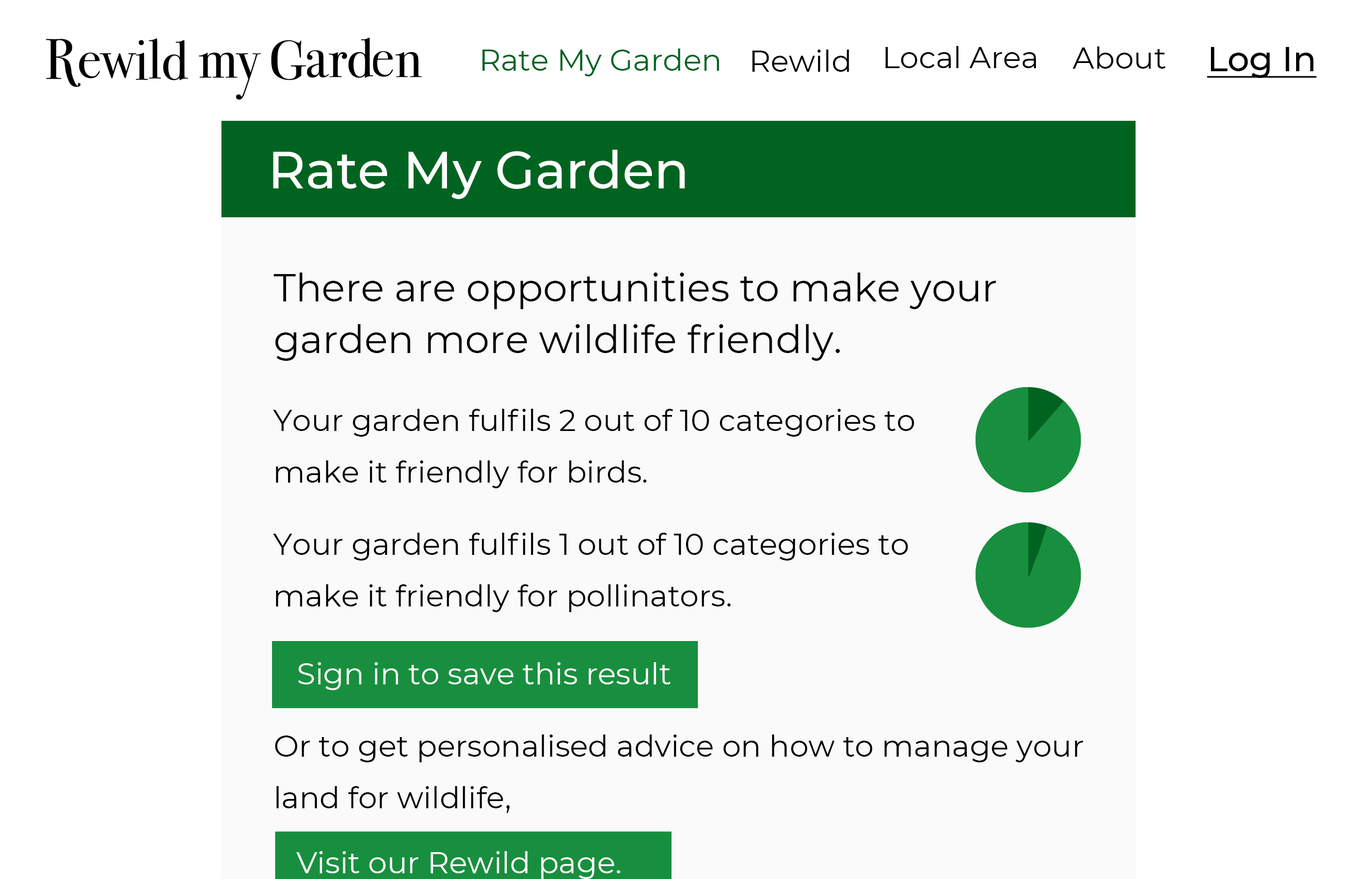
<style>
.page{position:relative;width:1357px;height:879px;background:#ffffff}
.page>*{position:absolute;margin:0}
.t1{font:30.1px "Montserrat-Regular";color:#006420}
.t2{font:30.1px "Montserrat-Regular";color:#000000}
.t3{font:30.1px "Montserrat-Regular";color:#010000}
.t4{font:34.4px "Montserrat-Medium";color:#000000;text-decoration:underline}
.t5{font:51.6px "Montserrat-Medium";color:#ffffff}
.t6{font:38.7px/51.6px "Montserrat-Regular";color:#000000}
.t7{font:30.1px/51.6px "Montserrat-Regular";color:#000000}
.t8{font:30.1px "Montserrat-Regular";color:#fefefe}
.t9{font:30.1px "Montserrat-Regular";color:#ffffff}
</style>
<div class="page">
<p class="t1" style="left:482px;top:49px;width:237px;height:27px">Rate My Garden</p>
<p class="t2" style="left:752px;top:50px;width:97px;height:22px">Rewild</p>
<p class="t3" style="left:885px;top:46px;width:151px;height:22px">Local Area</p>
<p class="t3" style="left:1072px;top:46px;width:93px;height:23px">About</p>
<p class="t4" style="left:1207px;top:47px;width:110px;height:31px">Log In</p>
<p class="t5" style="left:273px;top:150px;width:412px;height:49px">Rate My Garden</p>
<p class="t6" style="left:274px;top:272px;width:722px;height:89px">There are opportunities to make your garden more wildlife friendly.</p>
<p class="t7" style="left:273px;top:409px;width:641px;height:79px">Your garden fulfils 2 out of 10 categories to<br>make it friendly for birds.</p>
<p class="t7" style="left:273px;top:533px;width:635px;height:79px">Your garden fulfils 1 out of 10 categories to<br>make it friendly for pollinators.</p>
<p class="t8" style="left:298px;top:662px;width:372px;height:28px">Sign in to save this result</p>
<p class="t7" style="left:275px;top:734px;width:808px;height:79px">Or to get personalised advice on how to manage your <br>land for wildlife,</p>
<p class="t9" style="left:296px;top:851px;width:324px;height:28px">Visit our Rewild page.</p>
</div>
